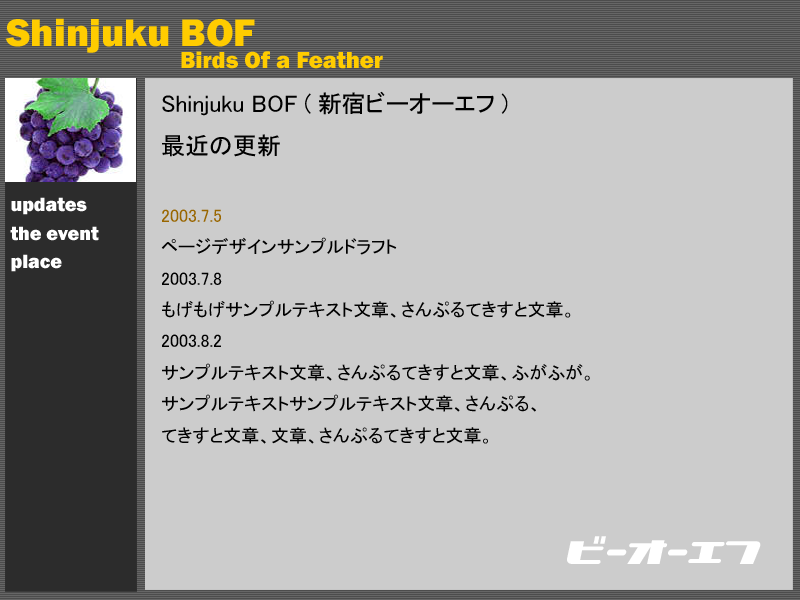
<style>
.page{position:relative;width:800px;height:600px;background:#cccccc}
.page>*{position:absolute;margin:0}
.t1{font:39.9px "FranklinGothic-Heavy";color:#ffcc00}
.t2{font:23.9px "FranklinGothic-Heavy";color:#ffcc00}
.t3{font:17.9px "MS-PGothic";color:#000000}
.t4{font:23.9px "MS-PGothic";color:#000000}
.t5{font:17.9px "MS-PGothic";color:#996600}
.t6{font:19.9px "FranklinGothic-Heavy";color:#ffffff}
.t7{font:35.9px "NationalyzeKAT";color:#ffffff}
</style>
<div class="page">
<p class="t1" style="left:5px;top:18px;width:250px;height:35px">Shinjuku BOF</p>
<p class="t2" style="left:181px;top:51px;width:202px;height:18px">Birds Of a Feather</p>
<p class="t3" style="left:161px;top:91px;width:429px;height:353px"><span class="t4">Shinjuku BOF (新宿ビーオーエフ)<br>最近の更新<br><br></span><span class="t5">2003.7.5<br></span>ページデザインサンプルドラフト<br>2003.7.8<br>もげもげサンプルテキスト文章、さんぷるてきすと文章。<br>2003.8.2<br>サンプルテキスト文章、さんぷるてきすと文章、ふがふが。<br>サンプルテキストサンプルテキスト文章、さんぷる、<br>てきすと文章、文章、さんぷるてきすと文章。</p>
<p class="t6" style="left:11px;top:197px;width:76px;height:18px">updates</p>
<p class="t6" style="left:10px;top:226px;width:89px;height:15px">the event</p>
<p class="t6" style="left:11px;top:254px;width:51px;height:18px">place</p>
<p class="t7" style="left:567px;top:536px;width:194px;height:28px">V[6[52</p>
</div>
